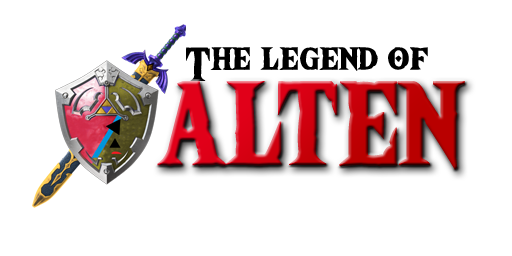
<style>
.page{position:relative;width:512px;height:256px;background:#ffffff}
.page>*{position:absolute;margin:0}
.t1{font:48px "TheWildBreathofZelda";color:#000000}
.t2{font:120px "TheWildBreathofZelda"}
</style>
<div class="page">
<p class="t1" style="left:186px;top:47px;width:242px;height:34px">The legend of</p>
<p class="t2" style="left:157px;top:81px;width:308px;height:89px">ALTEN</p>
</div>
